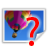
<style>
.page{position:relative;width:48px;height:48px;background:#ffffff}
.page>*{position:absolute;margin:0}
.t1{font:42px "MyriadPro-Regular";color:#ff0000}
</style>
<div class="page">
<p class="t1" style="left:26px;top:17px;width:13px;height:29px">?</p>
</div>
